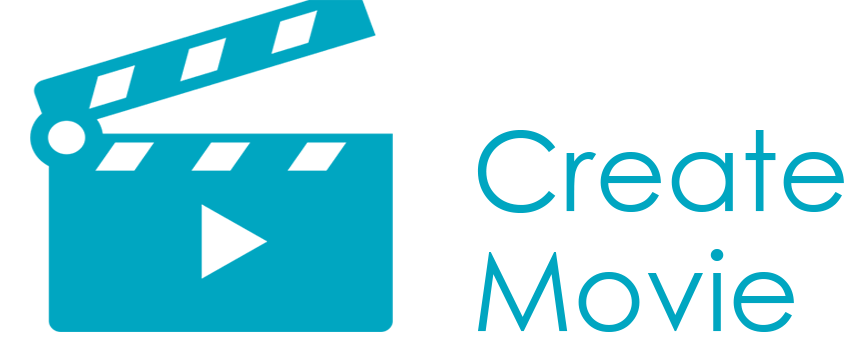
<style>
.page{position:relative;width:864px;height:345px;background:#ffffff}
.page>*{position:absolute;margin:0}
.t1{font:110px/120px "CenturyGothic";color:#00a6c1}
</style>
<div class="page">
<p class="t1" style="left:477px;top:130px;width:367px;height:202px">Create<br>Movie</p>
</div>
